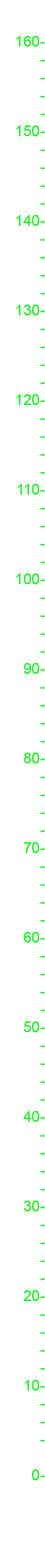
<style>
.page{position:relative;width:45px;height:1568px;background:#ffffff}
.page>*{position:absolute;margin:0}
.t1{font:14.9px "ArialMT";color:#03f913}
</style>
<div class="page">
<p class="t1" style="left:16px;top:36px;width:28px;height:1444px;text-align:right">160-<br>-<br>-<br>-<br>-<br>150-<br>-<br>-<br>-<br>-<br>140-<br>-<br>-<br>-<br>-<br>130-<br>-<br>-<br>-<br>-<br>120-<br>-<br>-<br>-<br>-<br>110-<br>-<br>-<br>-<br>-<br>100-<br>-<br>-<br>-<br>-<br>90-<br>-<br>-<br>-<br>-<br>80-<br>-<br>-<br>-<br>-<br>70-<br>-<br>-<br>-<br>-<br>60-<br>-<br>-<br>-<br>-<br>50-<br>-<br>-<br>-<br>-<br>40-<br>-<br>-<br>-<br>-<br>30-<br>-<br>-<br>-<br>-<br>20-<br>-<br>-<br>-<br>-<br>10-<br>-<br>-<br>-<br><br>   0-</p>
</div>
